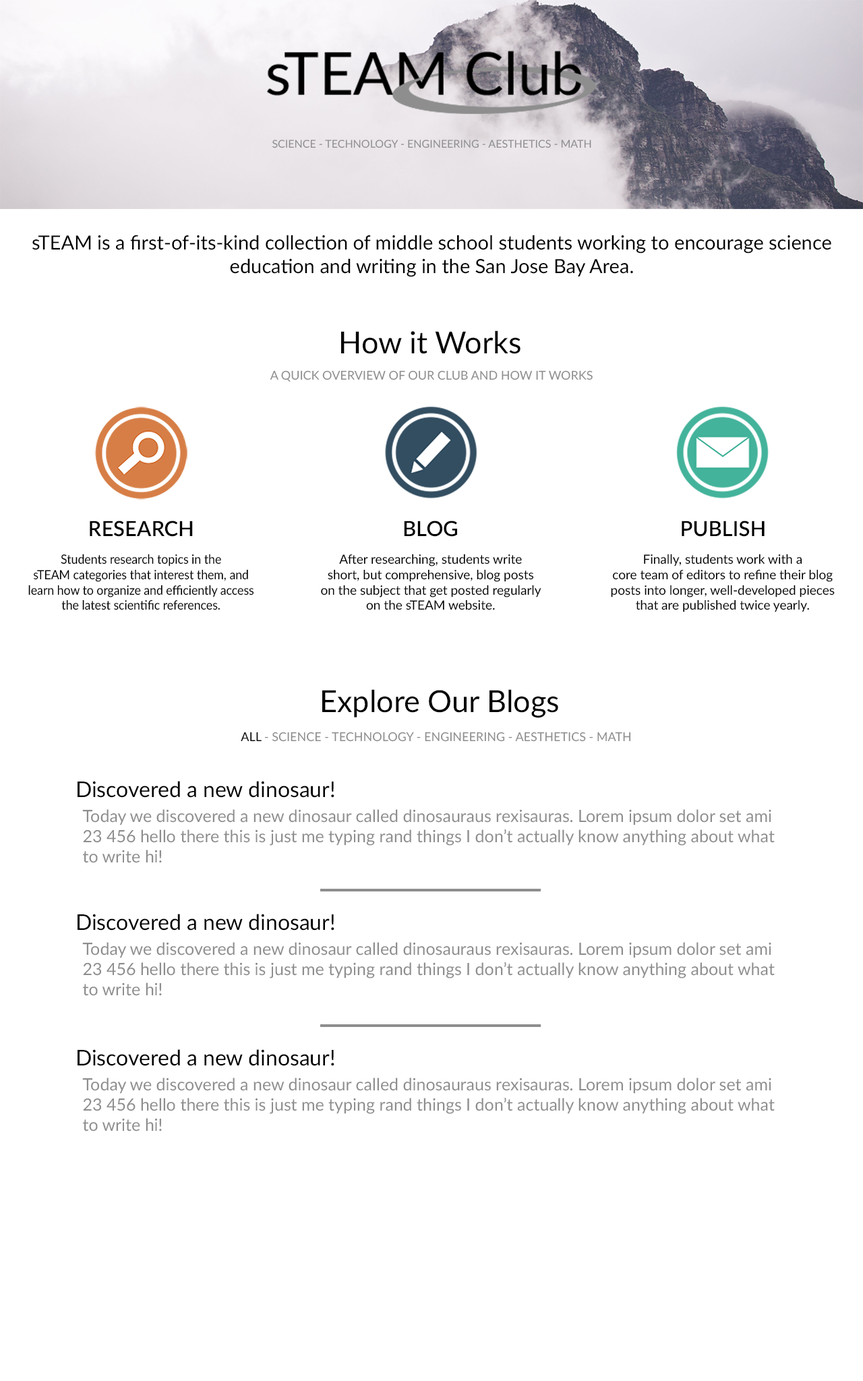
<style>
.page{position:relative;width:863px;height:1381px;background:#ffffff}
.page>*{position:absolute;margin:0}
.t1{font:10.8px "Lato-Regular";color:#8e8e8e}
.t2{font:19.6px "Lato-Regular";color:#000000}
.t3{font:30.4px "Lato-Regular";color:#000000}
.t4{font:12.1px "Lato-Regular";color:#8e8e8e}
.t5{font:20.9px "Lato-Semibold";color:#000000}
.t6{font:12.8px "Lato-Regular";color:#000000;scale:0.93 1}
.t7{font:12.8px "Lato-Regular";color:#000000}
.t8{font:12.1px "Lato-Regular";color:#000000}
.t9{font:21.6px "Lato-Regular";color:#000000}
.t10{font:16.9px "Lato-Regular";color:#8e8e8e}
</style>
<div class="page">
<p class="t1" style="left:272px;top:140px;width:319px;height:8px">SCIENCE - TECHNOLOGY - ENGINEERING - AESTHETICS - MATH</p>
<p class="t2" style="left:32px;top:235px;width:800px;height:42px;text-align:center">sTEAM is a first-of-its-kind collection of middle school students working to encourage science<br>education and writing in the San Jose Bay Area.</p>
<p class="t3" style="left:341px;top:330px;width:180px;height:24px">How it Works</p>
<p class="t4" style="left:270px;top:370px;width:323px;height:12px">A QUICK OVERVIEW OF OUR CLUB AND HOW IT WORKS</p>
<p class="t5" style="left:90px;top:521px;width:103px;height:16px">RESEARCH</p>
<p class="t5" style="left:404px;top:521px;width:53px;height:16px">BLOG</p>
<p class="t5" style="left:682px;top:521px;width:83px;height:16px">PUBLISH</p>
<p class="t6" style="left:28px;top:554px;width:226px;height:56px;text-align:center">Students research topics in the<br>sTEAM categories that interest them, and<br>learn how to organize and efficiently access<br>the latest scientific references.</p>
<p class="t7" style="left:321px;top:554px;width:221px;height:56px;text-align:center">After researching, students write<br>short, but comprehensive, blog posts<br>on the subject that get posted regularly<br>on the sTEAM website.</p>
<p class="t7" style="left:611px;top:554px;width:224px;height:58px;text-align:center">Finally, students work with a<br>core team of editors to refine their blog<br>posts into longer, well-developed pieces<br>that are published twice yearly.</p>
<p class="t3" style="left:322px;top:689px;width:236px;height:29px">Explore Our Blogs</p>
<p class="t4" style="left:241px;top:732px;width:390px;height:10px"><span class="t8">ALL</span> - SCIENCE - TECHNOLOGY - ENGINEERING - AESTHETICS - MATH</p>
<p class="t9" style="left:78px;top:781px;width:257px;height:17px">Discovered a new dinosaur!</p>
<p class="t10" style="left:82px;top:809px;width:693px;height:54px">Today we discovered a new dinosaur called dinosauraus rexisauras. Lorem ipsum dolor set ami <br>23 456 hello there this is just me typing rand things I don’t actually know anything about what<br>to write hi!</p>
<p class="t9" style="left:78px;top:914px;width:257px;height:17px">Discovered a new dinosaur!</p>
<p class="t10" style="left:82px;top:942px;width:693px;height:54px">Today we discovered a new dinosaur called dinosauraus rexisauras. Lorem ipsum dolor set ami <br>23 456 hello there this is just me typing rand things I don’t actually know anything about what<br>to write hi!</p>
<p class="t9" style="left:78px;top:1049px;width:257px;height:17px">Discovered a new dinosaur!</p>
<p class="t10" style="left:82px;top:1078px;width:693px;height:54px">Today we discovered a new dinosaur called dinosauraus rexisauras. Lorem ipsum dolor set ami <br>23 456 hello there this is just me typing rand things I don’t actually know anything about what<br>to write hi!</p>
</div>
